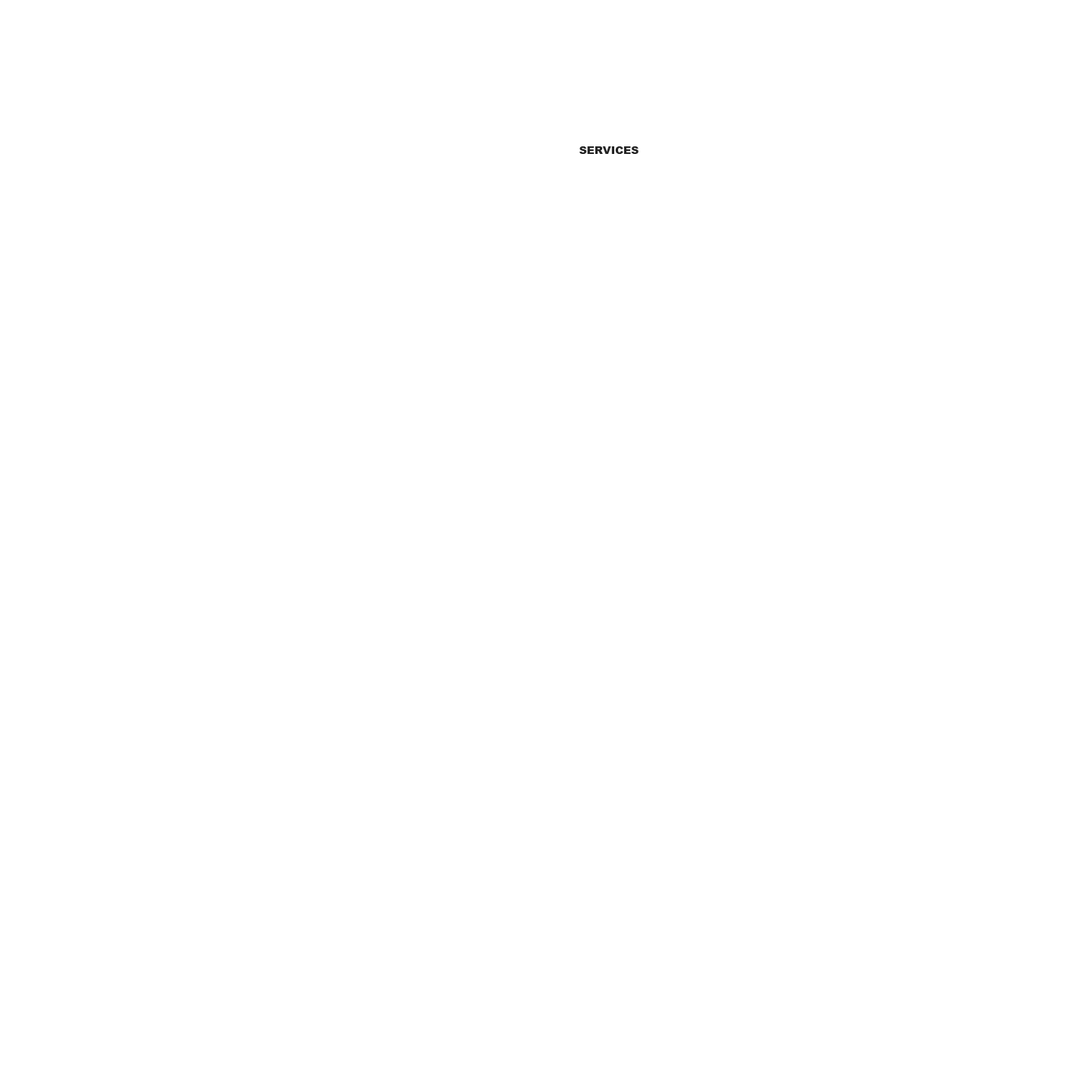
<style>
.page{position:relative;width:1092px;height:1092px;background:#ffffff}
.page>*{position:absolute;margin:0}
.t1{font:10.6px "Arial-Black";color:#252525}
</style>
<div class="page">
<p class="t1" style="left:579px;top:146px;width:60px;height:8px">SERVICES</p>
</div>
